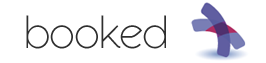
<style>
.page{position:relative;width:266px;height:63px;background:#ffffff}
.page>*{position:absolute;margin:0}
.t1{font:48px "RawengulkSans";color:#2f2f2f}
</style>
<div class="page">
<p class="t1" style="left:26px;top:15px;width:140px;height:34px">booked</p>
</div>
